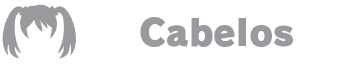
<style>
.page{position:relative;width:352px;height:64px;background:#ffffff}
.page>*{position:absolute;margin:0}
.t1{font:36px "RodinPro-UB";color:#989a9d}
</style>
<div class="page">
<p class="t1" style="left:140px;top:17px;width:153px;height:30px">Cabelos</p>
</div>
